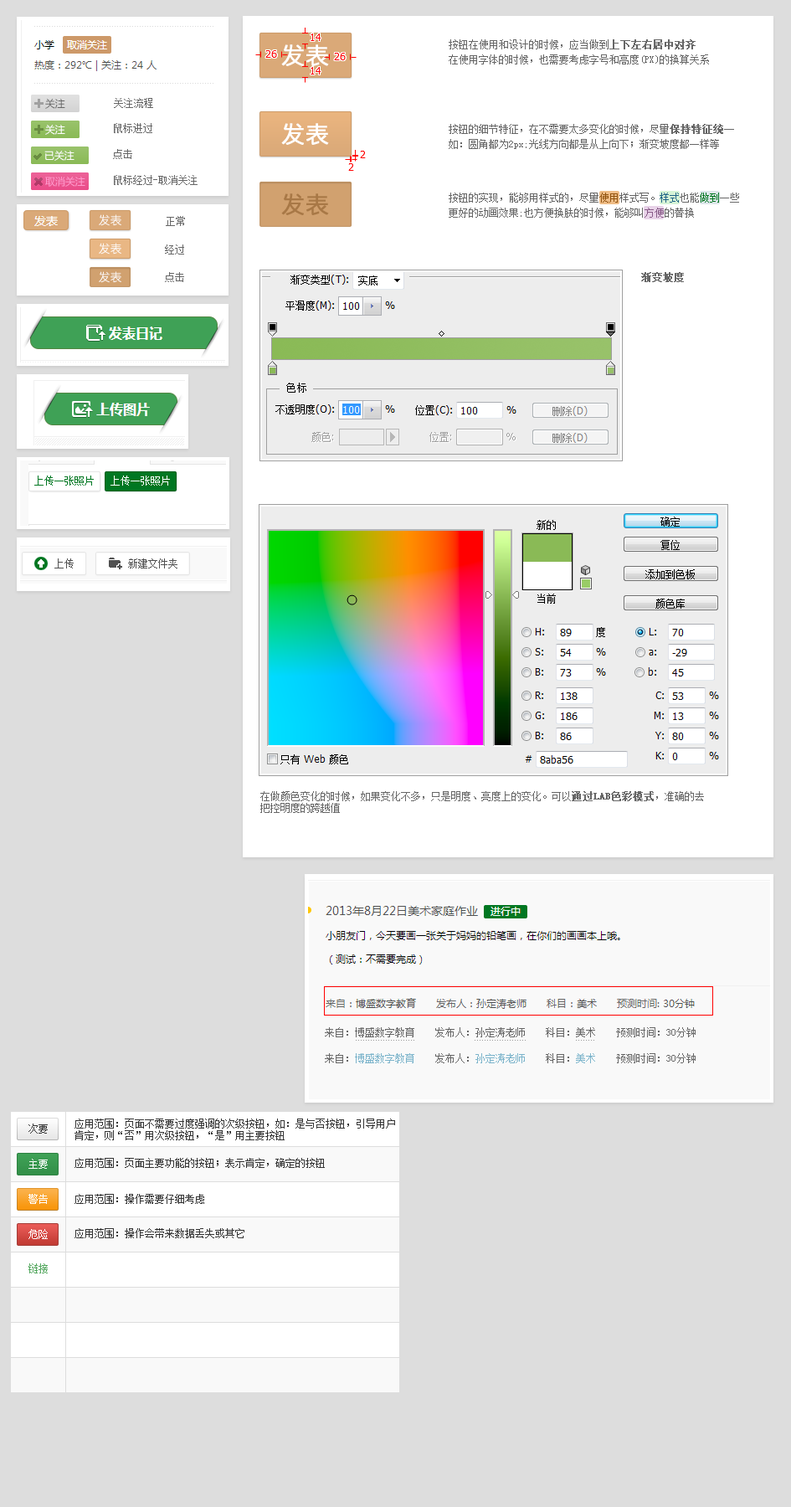
<style>
.page{position:relative;width:791px;height:1507px;background:#dddddd}
.page>*{position:absolute;margin:0}
.t1{font:10px/15.1px "NSimSun";color:#666666}
.t2{font:10px/15.1px "NSimSun";color:#666666;font-weight:bold}
.t3{font:23.4px "STHeitiSC-Light";color:#ffffff;font-weight:bold}
.t4{font:10px "MicrosoftYaHei";color:#666666}
.t5{font:10px "NSimSun";color:#666666}
.t6{font:10px "MicrosoftYaHei";color:#ffffff}
.t7{font:10px "MicrosoftYaHei";color:#ff99cc}
.t8{font:23.4px "STHeitiSC-Light";color:#a87846;font-weight:bold}
.t9{font:10px/15.1px "NSimSun";color:#91530f}
.t10{font:10px/15.1px "NSimSun";color:#216587}
.t11{font:10px/15.1px "NSimSun";color:#007722}
.t12{font:10px/15.1px "NSimSun";color:#875987}
.t13{font:11.7px "STHeitiSC-Light";color:#ffffff}
.t14{font:10px "NSimSun";color:#666666;font-weight:bold}
.t15{font:10px "NSimSun";color:#007722}
.t16{font:10px "NSimSun";color:#ffffff}
.t17{font:10px "NSimSun";color:#505050}
.t18{font:5px "NSimSun";color:#999999}
.t19{font:10px "NSimSun";color:#7cb4cb}
.t20{font:10px "SimSun";color:#333333}
.t21{font:10px "SimSun";color:#ffffff}
.t22{font:10px "SimSun";color:#55a860}
</style>
<div class="page">
<p class="t1" style="left:449px;top:39px;width:260px;height:25px;text-align:justify">按钮在使用和设计的时候，应当做到<span class="t2">上下左右居中对齐<br></span>在使用字体的时候，也需要考虑字号和高度(PX)的换算关系</p>
<p class="t3" style="left:281px;top:44px;width:48px;height:22px">发表</p>
<p class="t4" style="left:45px;top:99px;width:20px;height:10px">关注</p>
<p class="t5" style="left:114px;top:98px;width:39px;height:10px">关注流程</p>
<p class="t6" style="left:45px;top:125px;width:20px;height:10px">关注</p>
<p class="t5" style="left:114px;top:123px;width:38px;height:10px">鼠标进过</p>
<p class="t3" style="left:281px;top:123px;width:48px;height:22px">发表</p>
<p class="t1" style="left:449px;top:124px;width:285px;height:25px;text-align:justify">按钮的细节特征，在不需要太多变化的时候，尽量<span class="t2">保持特征统一<br></span>如：圆角都为2px;光线方向都是从上向下；渐变坡度都一样等</p>
<p class="t5" style="left:113px;top:149px;width:19px;height:10px">点击</p>
<p class="t6" style="left:44px;top:151px;width:31px;height:10px">已关注</p>
<p class="t7" style="left:45px;top:177px;width:40px;height:10px">取消关注</p>
<p class="t5" style="left:114px;top:175px;width:84px;height:10px">鼠标经过-取消关注</p>
<p class="t8" style="left:281px;top:193px;width:48px;height:22px">发表</p>
<p class="t1" style="left:449px;top:193px;width:290px;height:25px;text-align:justify">按钮的实现，能够用样式的，尽量<span class="t9">使用</span>样式写。<span class="t10">样式</span>也能<span class="t11">做到</span>一些<br>更好的动画效果;也方便换肤的时候，能够叫<span class="t12">方便</span>的替换</p>
<p class="t13" style="left:99px;top:214px;width:22px;height:12px">发表</p>
<p class="t5" style="left:166px;top:216px;width:19px;height:10px">正常</p>
<p class="t13" style="left:99px;top:243px;width:22px;height:12px">发表</p>
<p class="t5" style="left:165px;top:244px;width:19px;height:11px">经过</p>
<p class="t13" style="left:99px;top:271px;width:22px;height:12px">发表</p>
<p class="t5" style="left:165px;top:272px;width:19px;height:10px">点击</p>
<p class="t14" style="left:641px;top:272px;width:43px;height:10px">渐变坡度</p>
<p class="t15" style="left:34px;top:476px;width:60px;height:10px">上传一张照片</p>
<p class="t16" style="left:111px;top:476px;width:59px;height:10px">上传一张照片</p>
<p class="t17" style="left:54px;top:558px;width:20px;height:11px">上传</p>
<p class="t17" style="left:128px;top:558px;width:50px;height:11px">新建文件夹</p>
<p class="t5" style="left:260px;top:791px;width:444px;height:22px;text-align:justify">在做颜色变化的时候，如果变化不多，只是明度、亮度上的变化。可以<span class="t14">通过LAB色彩模式</span>，准确的去<br>把控明度的跨越值</p>
<p class="t5" style="left:325px;top:1027px;width:371px;height:10px">来自：博盛数字教育    发布人：孙定涛老师    科目：美术    预测时间：30分钟</p>
<p class="t18" style="left:356px;top:1040px;width:58px;height:1px">........................</p>
<p class="t18" style="left:475px;top:1040px;width:51px;height:1px">.....................</p>
<p class="t18" style="left:576px;top:1040px;width:18px;height:1px">........</p>
<p class="t5" style="left:325px;top:1053px;width:371px;height:10px">来自：<span class="t19">博盛数字教育</span>    发布人：<span class="t19">孙定涛老师 </span>   科目：<span class="t19">美术</span>    预测时间：30分钟</p>
<p class="t20" style="left:75px;top:1119px;width:320px;height:21px;text-align:justify">应用范围：页面不需要过度强调的次级按钮，如：是与否按钮，引导用户<br>肯定，则“否”用次级按钮，“是”用主要按钮</p>
<p class="t20" style="left:28px;top:1124px;width:20px;height:10px">次要</p>
<p class="t20" style="left:75px;top:1158px;width:250px;height:10px">应用范围：页面主要功能的按钮；表示肯定，确定的按钮</p>
<p class="t21" style="left:28px;top:1159px;width:20px;height:10px">主要</p>
<p class="t21" style="left:28px;top:1194px;width:20px;height:10px">警告</p>
<p class="t20" style="left:75px;top:1194px;width:129px;height:10px">应用范围：操作需要仔细考虑</p>
<p class="t21" style="left:28px;top:1229px;width:20px;height:10px">危险</p>
<p class="t20" style="left:75px;top:1228px;width:169px;height:10px">应用范围：操作会带来数据丢失或其它</p>
<p class="t22" style="left:28px;top:1263px;width:20px;height:10px">链接</p>
</div>
